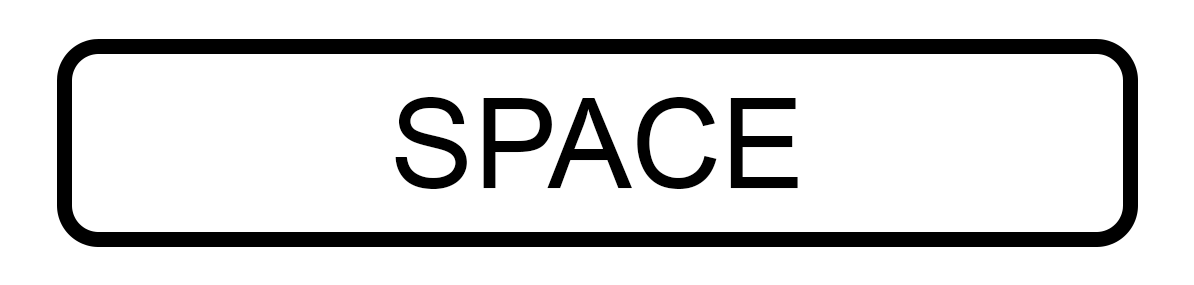
<style>
.page{position:relative;width:1194px;height:285px;background:#ffffff}
.page>*{position:absolute;margin:0}
.t1{font:125px "ArialMT";color:#000000}
</style>
<div class="page">
<p class="t1" style="left:395px;top:97px;width:403px;height:92px">SPACE</p>
</div>
